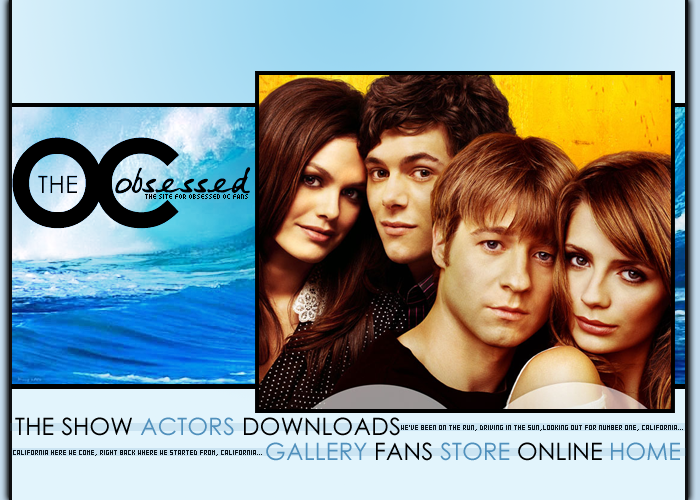
<style>
.page{position:relative;width:700px;height:500px}
.page>*{position:absolute;margin:0}
.t1{font:120px "CenturyGothic-Bold";letter-spacing:-0.15em;color:#000000}
.t2{font:36px "Mumsies";letter-spacing:-0.025em;color:#000000}
.t3{font:24px "CenturyGothic";letter-spacing:0.015em;color:#000000}
.t4{font:8px "04b24";color:#000000}
.t5{font:24px "CenturyGothic";color:#000000}
.t6{font:24px "CenturyGothic";color:#5090bc}
.t7{font:8px "04b24";color:#0d171e}
</style>
<div class="page">
<p class="t1" style="left:12px;top:137px;width:167px;height:92px">OC</p>
<p class="t2" style="left:115px;top:167px;width:136px;height:27px">obsessed</p>
<p class="t3" style="left:38px;top:175px;width:39px;height:18px">THE</p>
<p class="t4" style="left:145px;top:194px;width:103px;height:5px">the site for obsessed oc fans</p>
<p class="t5" style="left:15px;top:417px;width:117px;height:19px">THE SHOW</p>
<p class="t6" style="left:140px;top:417px;width:94px;height:19px">ACTORS</p>
<p class="t5" style="left:244px;top:417px;width:156px;height:19px">DOWNLOADS</p>
<p class="t7" style="left:401px;top:425px;width:282px;height:6px">WE'VE BEEN ON THE RUN, DRIVING IN THE SUN,LOOKING OUT FOR NUMBER ONE, CALIFORNIA...</p>
<p class="t6" style="left:266px;top:442px;width:101px;height:19px">GALLERY</p>
<p class="t5" style="left:376px;top:442px;width:56px;height:19px">FANS</p>
<p class="t6" style="left:440px;top:442px;width:70px;height:19px">STORE</p>
<p class="t5" style="left:518px;top:442px;width:84px;height:19px">ONLINE</p>
<p class="t6" style="left:611px;top:442px;width:69px;height:19px">HOME</p>
<p class="t7" style="left:13px;top:450px;width:249px;height:6px">CALIFORNIA HERE WE COME, RIGHT BACK WHERE WE STARTED FROM, CALIFORNIA...</p>
</div>
